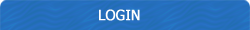
<style>
.page{position:relative;width:250px;height:30px}
.page>*{position:absolute;margin:0}
.t1{font:14px "Tahoma";color:#ffffff;font-weight:bold}
</style>
<div class="page">
<p class="t1" style="left:99px;top:9px;width:41px;height:12px">LOGIN</p>
</div>
